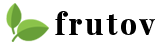
<style>
.page{position:relative;width:159px;height:49px;background:#ffffff}
.page>*{position:absolute;margin:0}
.t1{font:30px "PlayfairDisplay-Bold";letter-spacing:0.1em;color:#000000}
</style>
<div class="page">
<p class="t1" style="left:55px;top:11px;width:100px;height:24px">frutov</p>
</div>
